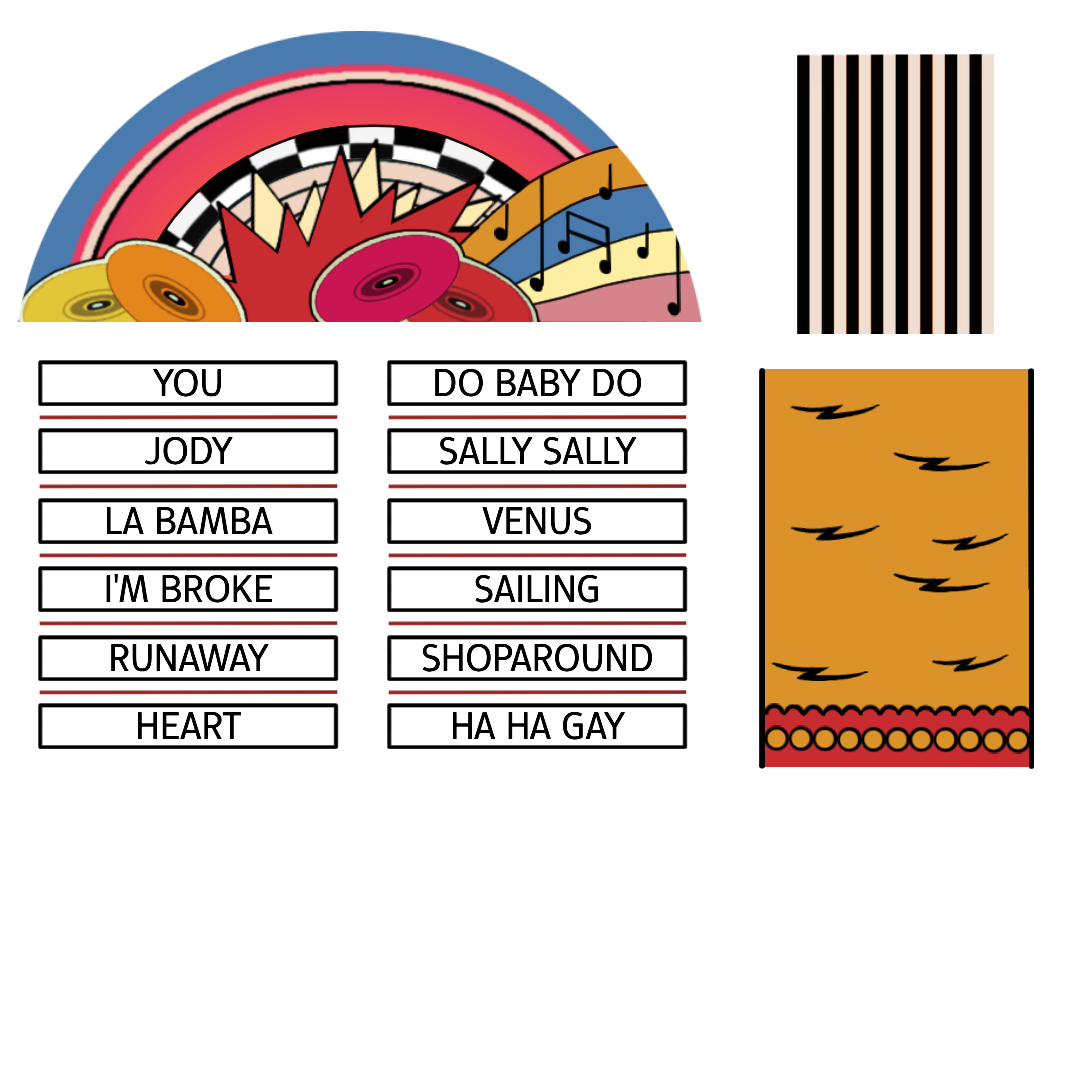
<style>
.page{position:relative;width:1080px;height:1080px;background:#ffffff}
.page>*{position:absolute;margin:0}
.t1{font:40px "EpundaSans-Regular";color:#000000}
</style>
<div class="page">
<p class="t1" style="left:153px;top:368px;width:68px;height:29px">YOU</p>
<p class="t1" style="left:435px;top:368px;width:207px;height:29px">DO BABY DO</p>
<p class="t1" style="left:145px;top:436px;width:88px;height:29px">JODY</p>
<p class="t1" style="left:440px;top:436px;width:197px;height:29px">SALLY SALLY</p>
<p class="t1" style="left:107px;top:507px;width:166px;height:28px">LA BAMBA</p>
<p class="t1" style="left:482px;top:506px;width:110px;height:29px">VENUS</p>
<p class="t1" style="left:106px;top:574px;width:166px;height:29px">I'M BROKE</p>
<p class="t1" style="left:475px;top:574px;width:123px;height:29px">SAILING</p>
<p class="t1" style="left:111px;top:643px;width:158px;height:29px">RUNAWAY</p>
<p class="t1" style="left:422px;top:643px;width:230px;height:29px">SHOPAROUND</p>
<p class="t1" style="left:138px;top:711px;width:103px;height:29px">HEART</p>
<p class="t1" style="left:453px;top:711px;width:172px;height:29px">HA HA GAY</p>
</div>
